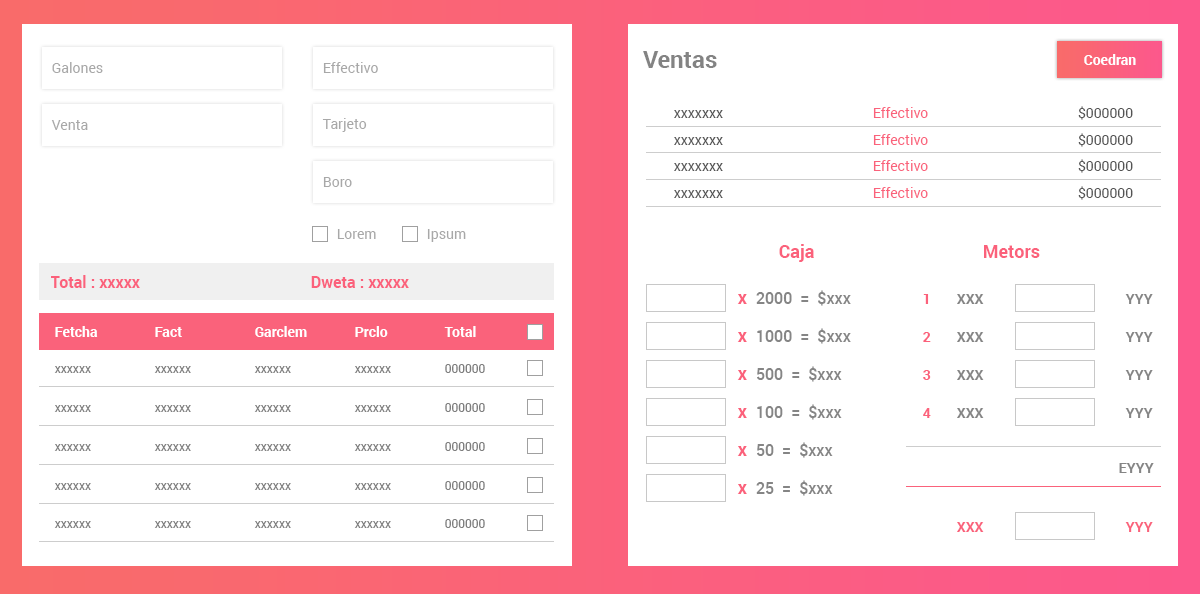
<style>
.page{position:relative;width:1200px;height:594px;background:#ffffff}
.page>*{position:absolute;margin:0}
.t1{font:24px "Roboto-Bold";color:#838383}
.t2{font:14px "Roboto-Bold";color:#ffffff}
.t3{font:14px "Roboto-Regular";color:#a8a8a8}
.t4{font:14px "Roboto-Regular";color:#fa627b}
.t5{font:14px "Roboto-Regular";color:#545454}
.t6{font:18px "Roboto-Bold";color:#fb617b}
.t7{font:16px "Roboto-Bold";color:#fb617b}
.t8{font:16px "Roboto-Medium";color:#858585}
.t9{font:14px "Roboto-Bold";color:#fb617b}
.t10{font:14px "Roboto-Bold";color:#858585}
.t11{font:12px "Roboto-Regular";color:#7f7f7f}
.t12{font:14px "Roboto-Bold";color:#fa627b}
</style>
<div class="page">
<p class="t1" style="left:643px;top:51px;width:74px;height:17px">Ventas</p>
<p class="t2" style="left:1084px;top:54px;width:52px;height:11px">Coedran</p>
<p class="t3" style="left:52px;top:62px;width:51px;height:11px">Galones</p>
<p class="t3" style="left:323px;top:62px;width:55px;height:11px">Effectivo</p>
<p class="t4" style="left:674px;top:106px;width:459px;height:14px"><span class="t5">xxxxxxx                                           </span>Effectivo                                           <span class="t5">$000000</span></p>
<p class="t3" style="left:51px;top:120px;width:37px;height:10px">Venta</p>
<p class="t3" style="left:322px;top:118px;width:45px;height:14px">Tarjeto</p>
<p class="t4" style="left:674px;top:133px;width:459px;height:14px"><span class="t5">xxxxxxx                                           </span>Effectivo                                           <span class="t5">$000000</span></p>
<p class="t4" style="left:674px;top:159px;width:459px;height:14px"><span class="t5">xxxxxxx                                           </span>Effectivo                                           <span class="t5">$000000</span></p>
<p class="t3" style="left:323px;top:177px;width:29px;height:10px">Boro</p>
<p class="t4" style="left:674px;top:186px;width:459px;height:14px"><span class="t5">xxxxxxx                                           </span>Effectivo                                           <span class="t5">$000000</span></p>
<p class="t3" style="left:337px;top:229px;width:39px;height:10px">Lorem</p>
<p class="t3" style="left:427px;top:229px;width:39px;height:13px">Ipsum</p>
<p class="t6" style="left:779px;top:244px;width:35px;height:18px">Caja</p>
<p class="t6" style="left:984px;top:245px;width:56px;height:13px">Metors</p>
<p class="t7" style="left:51px;top:275px;width:89px;height:13px">Total : xxxxx</p>
<p class="t7" style="left:311px;top:276px;width:98px;height:12px">Dweta : xxxxx</p>
<p class="t8" style="left:737px;top:290px;width:114px;height:16px"><span class="t6">x  </span>2000  =  $xxx</p>
<p class="t9" style="left:923px;top:294px;width:6px;height:10px">1</p>
<p class="t10" style="left:957px;top:294px;width:27px;height:10px">XXX</p>
<p class="t10" style="left:1125px;top:294px;width:28px;height:10px">YYY</p>
<p class="t2" style="left:55px;top:326px;width:43px;height:11px">Fetcha</p>
<p class="t2" style="left:155px;top:327px;width:27px;height:10px">Fact</p>
<p class="t2" style="left:255px;top:326px;width:52px;height:11px">Garclem</p>
<p class="t2" style="left:355px;top:326px;width:33px;height:11px">Prclo</p>
<p class="t2" style="left:444px;top:326px;width:32px;height:11px">Total</p>
<p class="t8" style="left:737px;top:328px;width:114px;height:16px"><span class="t6">x  </span>1000  =  $xxx</p>
<p class="t9" style="left:923px;top:332px;width:8px;height:10px">2</p>
<p class="t10" style="left:957px;top:332px;width:27px;height:10px">XXX</p>
<p class="t10" style="left:1125px;top:332px;width:28px;height:10px">YYY</p>
<p class="t11" style="left:54px;top:366px;width:37px;height:7px">xxxxxx</p>
<p class="t11" style="left:154px;top:366px;width:37px;height:7px">xxxxxx</p>
<p class="t11" style="left:254px;top:366px;width:37px;height:7px">xxxxxx</p>
<p class="t11" style="left:354px;top:366px;width:37px;height:7px">xxxxxx</p>
<p class="t11" style="left:445px;top:364px;width:40px;height:9px">000000</p>
<p class="t8" style="left:737px;top:366px;width:105px;height:16px"><span class="t6">x  </span>500  =  $xxx</p>
<p class="t9" style="left:923px;top:370px;width:8px;height:10px">3</p>
<p class="t10" style="left:957px;top:370px;width:27px;height:10px">XXX</p>
<p class="t10" style="left:1125px;top:370px;width:28px;height:10px">YYY</p>
<p class="t11" style="left:54px;top:405px;width:37px;height:7px">xxxxxx</p>
<p class="t11" style="left:154px;top:405px;width:37px;height:7px">xxxxxx</p>
<p class="t11" style="left:254px;top:405px;width:37px;height:7px">xxxxxx</p>
<p class="t11" style="left:354px;top:405px;width:37px;height:7px">xxxxxx</p>
<p class="t11" style="left:445px;top:403px;width:40px;height:9px">000000</p>
<p class="t8" style="left:737px;top:404px;width:105px;height:16px"><span class="t6">x  </span>100  =  $xxx</p>
<p class="t9" style="left:923px;top:408px;width:8px;height:10px">4</p>
<p class="t10" style="left:957px;top:408px;width:27px;height:10px">XXX</p>
<p class="t10" style="left:1125px;top:408px;width:28px;height:10px">YYY</p>
<p class="t11" style="left:54px;top:444px;width:37px;height:7px">xxxxxx</p>
<p class="t11" style="left:154px;top:444px;width:37px;height:7px">xxxxxx</p>
<p class="t11" style="left:254px;top:444px;width:37px;height:7px">xxxxxx</p>
<p class="t11" style="left:354px;top:444px;width:37px;height:7px">xxxxxx</p>
<p class="t11" style="left:445px;top:442px;width:40px;height:9px">000000</p>
<p class="t8" style="left:737px;top:442px;width:96px;height:16px"><span class="t6">x  </span>50  =  $xxx</p>
<p class="t10" style="left:1119px;top:463px;width:35px;height:10px">EYYY</p>
<p class="t11" style="left:54px;top:483px;width:37px;height:7px">xxxxxx</p>
<p class="t11" style="left:154px;top:483px;width:37px;height:7px">xxxxxx</p>
<p class="t11" style="left:254px;top:483px;width:37px;height:7px">xxxxxx</p>
<p class="t11" style="left:354px;top:483px;width:37px;height:7px">xxxxxx</p>
<p class="t11" style="left:445px;top:481px;width:40px;height:9px">000000</p>
<p class="t8" style="left:737px;top:480px;width:96px;height:16px"><span class="t6">x  </span>25  =  $xxx</p>
<p class="t11" style="left:54px;top:521px;width:37px;height:7px">xxxxxx</p>
<p class="t11" style="left:154px;top:521px;width:37px;height:7px">xxxxxx</p>
<p class="t11" style="left:254px;top:521px;width:37px;height:7px">xxxxxx</p>
<p class="t11" style="left:354px;top:521px;width:37px;height:7px">xxxxxx</p>
<p class="t11" style="left:445px;top:519px;width:40px;height:9px">000000</p>
<p class="t12" style="left:957px;top:522px;width:27px;height:10px">XXX</p>
<p class="t12" style="left:1125px;top:522px;width:28px;height:10px">YYY</p>
</div>
